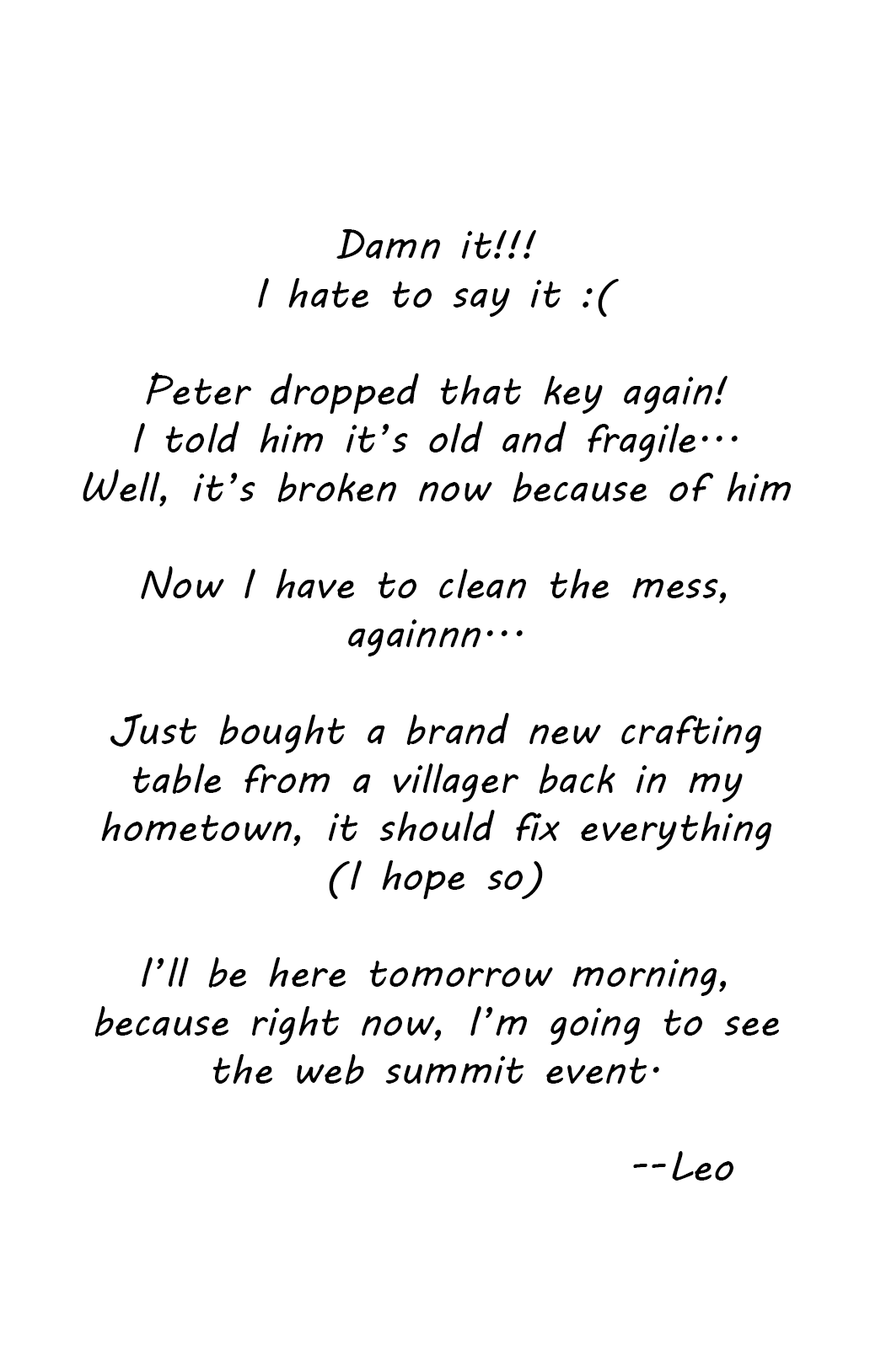
<style>
.page{position:relative;width:870px;height:1371px;background:#ffffff}
.page>*{position:absolute;margin:0}
.t1{font:40.5px "MVBoli";color:#000000}
</style>
<div class="page">
<p class="t1" style="left:83px;top:229px;width:707px;height:952px;text-align:center">Damn it!!! <br>I hate to say it :(<br><br>Peter dropped that key again!<br>I told him it’s old and fragile...<br>Well, it’s broken now because of him<br><br>Now I have to clean the mess, againnn...<br><br>Just bought a brand new crafting table from a villager back in my hometown, it should fix everything <br>(I hope so)<br><br>I’ll be here tomorrow morning, because right now, I’m going to see the web summit event.<br><br>                         --Leo</p>
</div>
